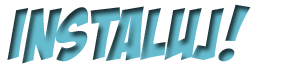
<style>
.page{position:relative;width:289px;height:75px;background:#ffffff}
.page>*{position:absolute;margin:0}
.t1{font:72px "BadaBoomBB"}
</style>
<div class="page">
<p class="t1" style="left:7px;top:4px;width:244px;height:60px">Instaluj!</p>
</div>
